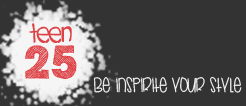
<style>
.page{position:relative;width:246px;height:106px;background:#333333}
.page>*{position:absolute;margin:0}
.t1{font:29.1px "Starlight";color:#dd4246}
.t2{font:44.7px "ScribbleBoxDEMO";color:#dd4246}
.t3{font:18.1px "TakeMeAwayBabe";color:#f5f5f5}
</style>
<div class="page">
<p class="t1" style="left:29px;top:23px;width:43px;height:20px">Teen</p>
<p class="t2" style="left:25px;top:45px;width:52px;height:35px">25</p>
<p class="t3" style="left:93px;top:76px;width:149px;height:17px">Be inspirite your style</p>
</div>
